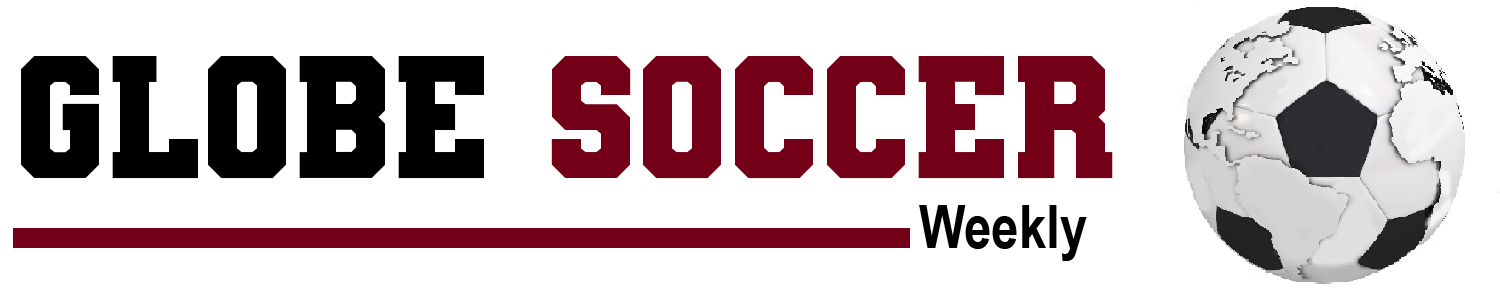
<style>
.page{position:relative;width:1500px;height:300px;background:#ffffff}
.page>*{position:absolute;margin:0}
.t1{font:174px "VarsityTeamBold";color:#730016}
.t2{font:174px "VarsityTeamBold";color:#000000}
.t3{font:60px "ArialNarrow-Bold";color:#000000}
</style>
<div class="page">
<p class="t1" style="left:21px;top:56px;width:1092px;height:123px"><span class="t2">GLOBE </span>SOCCER</p>
<p class="t3" style="left:919px;top:205px;width:168px;height:56px">Weekly</p>
</div>
